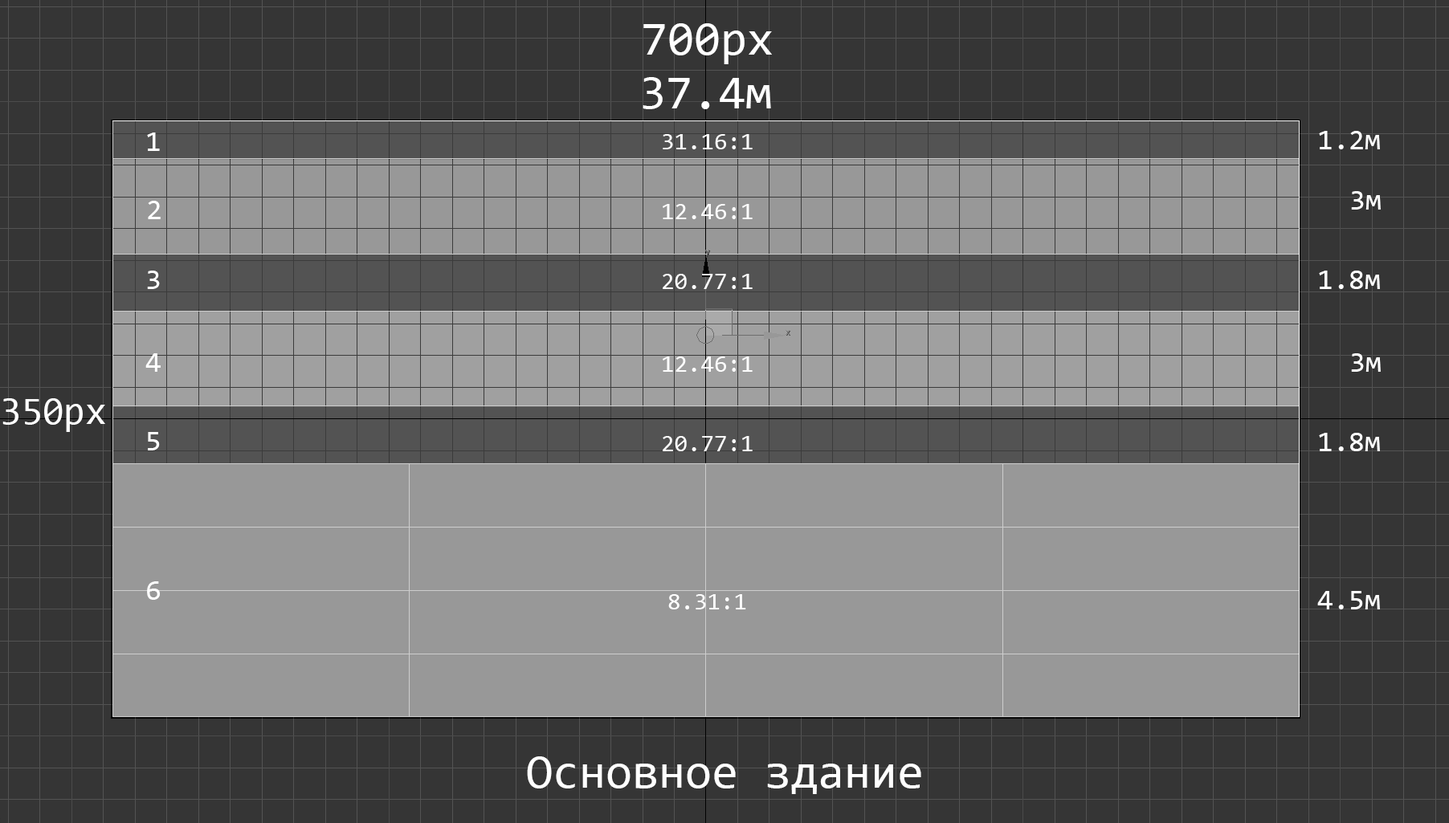
<style>
.page{position:relative;width:1449px;height:823px;background:#989898}
.page>*{position:absolute;margin:0}
.t1{font:48.2px "Consolas";color:#ffffff}
.t2{font:28.9px "Consolas";color:#ffffff}
.t3{font:24.1px "Consolas";color:#ffffff}
.t4{font:38.5px "Consolas";color:#ffffff}
</style>
<div class="page">
<p class="t1" style="left:643px;top:23px;width:129px;height:41px">700px</p>
<p class="t1" style="left:642px;top:77px;width:129px;height:32px">37.4м</p>
<p class="t2" style="left:147px;top:133px;width:13px;height:18px">1</p>
<p class="t3" style="left:663px;top:134px;width:89px;height:15px">31.16:1</p>
<p class="t2" style="left:1319px;top:131px;width:61px;height:18px">1.2м</p>
<p class="t2" style="left:1351px;top:191px;width:29px;height:19px">3м</p>
<p class="t2" style="left:148px;top:201px;width:13px;height:18px">2</p>
<p class="t3" style="left:663px;top:204px;width:89px;height:15px">12.46:1</p>
<p class="t2" style="left:147px;top:271px;width:13px;height:18px">3</p>
<p class="t3" style="left:663px;top:274px;width:89px;height:15px">20.77:1</p>
<p class="t2" style="left:1319px;top:271px;width:61px;height:18px">1.8м</p>
<p class="t2" style="left:145px;top:353px;width:16px;height:19px">4</p>
<p class="t2" style="left:1351px;top:353px;width:29px;height:19px">3м</p>
<p class="t3" style="left:663px;top:357px;width:89px;height:15px">12.46:1</p>
<p class="t4" style="left:2px;top:398px;width:103px;height:34px">350px</p>
<p class="t2" style="left:148px;top:432px;width:12px;height:19px">5</p>
<p class="t3" style="left:663px;top:436px;width:89px;height:15px">20.77:1</p>
<p class="t2" style="left:1319px;top:433px;width:61px;height:18px">1.8м</p>
<p class="t2" style="left:147px;top:581px;width:13px;height:19px">6</p>
<p class="t2" style="left:1317px;top:591px;width:63px;height:19px">4.5м</p>
<p class="t3" style="left:668px;top:594px;width:78px;height:16px">8.31:1</p>
<p class="t1" style="left:527px;top:756px;width:394px;height:38px">Основное здание</p>
</div>
